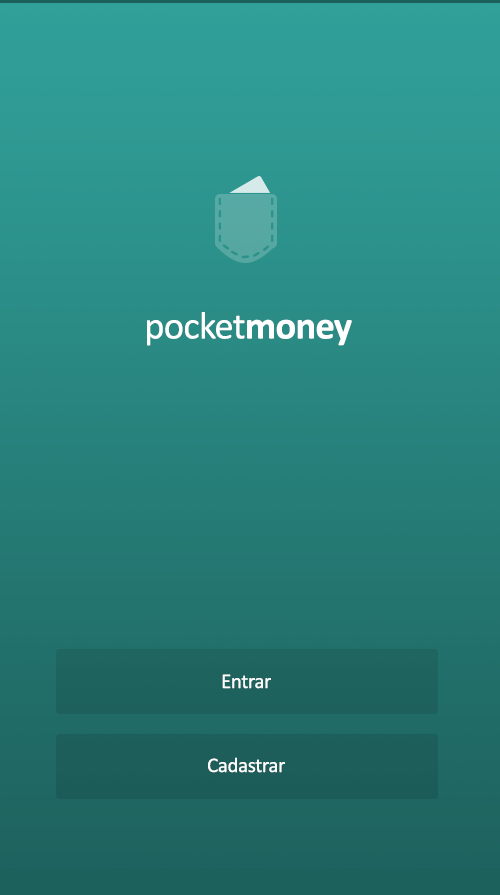
<style>
.page{position:relative;width:500px;height:895px}
.page>*{position:absolute;margin:0}
.t1{font:38.6px "Calibri";letter-spacing:-0.02em;color:#ffffff}
.t2{font:38.6px "Calibri-Bold";letter-spacing:-0.02em;color:#ffffff}
.t3{font:21px "Calibri";letter-spacing:-0.02em;color:#ffffff}
</style>
<div class="page">
<p class="t1" style="left:147px;top:312px;width:205px;height:34px">pocket<span class="t2">money</span></p>
<p class="t3" style="left:222px;top:674px;width:49px;height:15px">Entrar</p>
<p class="t3" style="left:208px;top:757px;width:77px;height:16px">Cadastrar</p>
</div>
